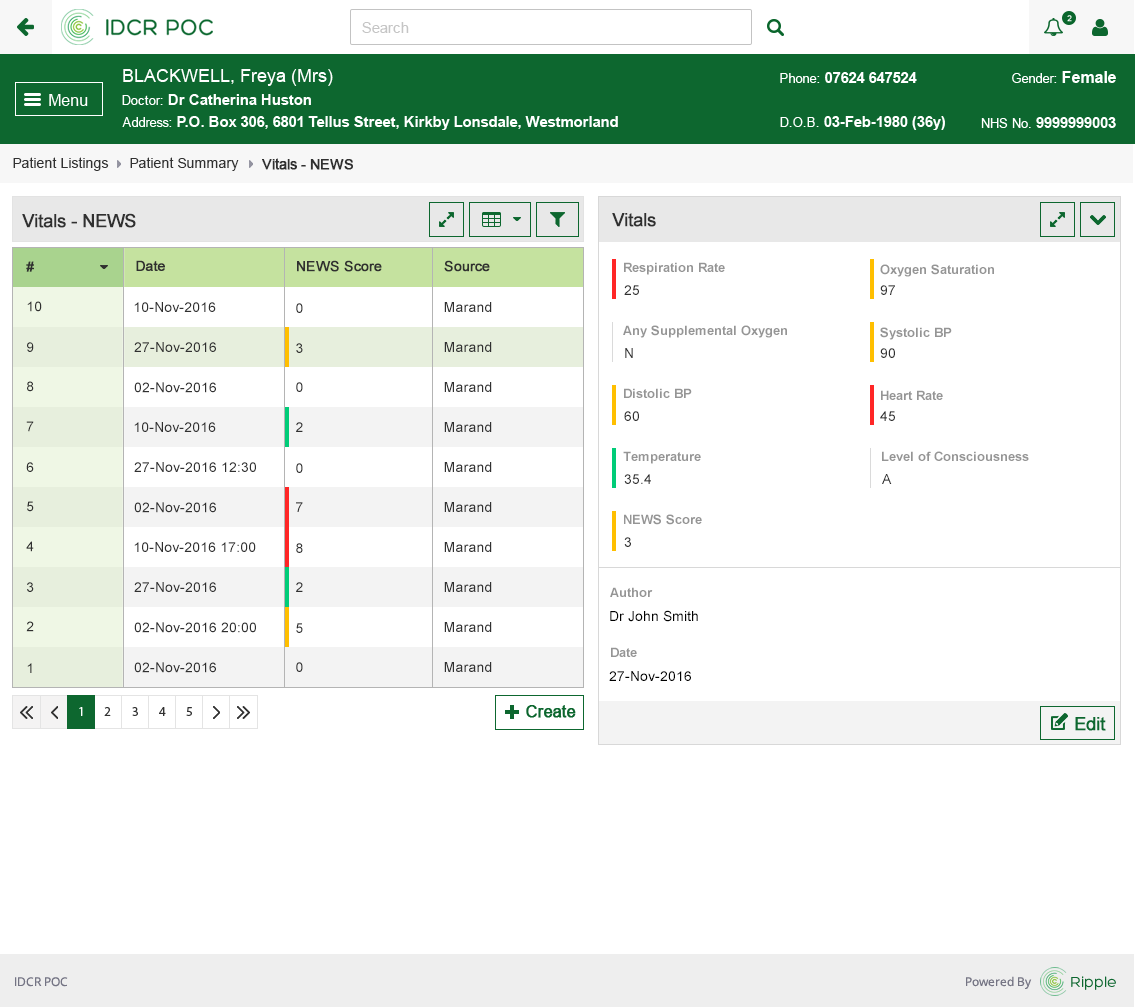
<style>
.page{position:relative;width:1135px;height:1007px;background:#ffffff}
.page>*{position:absolute;margin:0}
.t1{font:14px "ArialMT";color:#313131}
.t2{font:14px "ArialMT";color:#313131;font-weight:bold}
.t3{font:18px "ArialMT";color:#303030;font-weight:bold}
.t4{font:14px "ArialMT";color:#303030;font-weight:bold}
.t5{font:13px "Arial-BoldMT";color:#959595}
.t6{font:14px "ArialMT";color:#303030}
.t7{font:14px "ArialMT";color:#000000}
</style>
<div class="page">
<p class="t1" style="left:13px;top:157px;width:96px;height:14px">Patient Listings</p>
<p class="t1" style="left:130px;top:157px;width:109px;height:14px">Patient Summary</p>
<p class="t2" style="left:262px;top:158px;width:91px;height:12px">Vitals - NEWS</p>
<p class="t3" style="left:22px;top:213px;width:114px;height:15px">Vitals - NEWS</p>
<p class="t3" style="left:612px;top:213px;width:44px;height:14px">Vitals</p>
<p class="t4" style="left:26px;top:261px;width:8px;height:11px">#</p>
<p class="t4" style="left:136px;top:260px;width:29px;height:11px">Date</p>
<p class="t4" style="left:297px;top:260px;width:85px;height:12px">NEWS Score</p>
<p class="t4" style="left:444px;top:260px;width:46px;height:12px">Source</p>
<p class="t5" style="left:624px;top:262px;width:101px;height:13px">Respiration Rate</p>
<p class="t5" style="left:880px;top:264px;width:114px;height:13px">Oxygen Saturation</p>
<p class="t6" style="left:624px;top:285px;width:15px;height:10px">25</p>
<p class="t6" style="left:880px;top:285px;width:15px;height:10px">97</p>
<p class="t6" style="left:27px;top:301px;width:15px;height:11px">10</p>
<p class="t6" style="left:134px;top:302px;width:82px;height:10px">10-Nov-2016</p>
<p class="t6" style="left:296px;top:303px;width:7px;height:10px">0</p>
<p class="t6" style="left:444px;top:302px;width:48px;height:10px">Marand</p>
<p class="t5" style="left:623px;top:325px;width:164px;height:13px">Any Supplemental Oxygen</p>
<p class="t5" style="left:880px;top:327px;width:72px;height:13px">Systolic BP</p>
<p class="t6" style="left:27px;top:342px;width:7px;height:10px">9</p>
<p class="t6" style="left:134px;top:342px;width:82px;height:10px">27-Nov-2016</p>
<p class="t6" style="left:444px;top:342px;width:48px;height:10px">Marand</p>
<p class="t6" style="left:296px;top:343px;width:7px;height:10px">3</p>
<p class="t6" style="left:625px;top:348px;width:8px;height:10px">N</p>
<p class="t6" style="left:880px;top:348px;width:15px;height:10px">90</p>
<p class="t6" style="left:27px;top:381px;width:7px;height:11px">8</p>
<p class="t6" style="left:134px;top:382px;width:82px;height:11px">02-Nov-2016</p>
<p class="t6" style="left:296px;top:382px;width:7px;height:10px">0</p>
<p class="t6" style="left:444px;top:382px;width:48px;height:10px">Marand</p>
<p class="t5" style="left:624px;top:388px;width:68px;height:10px">Distolic BP</p>
<p class="t5" style="left:881px;top:390px;width:62px;height:10px">Heart Rate</p>
<p class="t6" style="left:624px;top:411px;width:15px;height:10px">60</p>
<p class="t6" style="left:880px;top:411px;width:15px;height:10px">45</p>
<p class="t6" style="left:26px;top:421px;width:8px;height:11px">7</p>
<p class="t6" style="left:134px;top:422px;width:82px;height:10px">10-Nov-2016</p>
<p class="t6" style="left:296px;top:422px;width:7px;height:10px">2</p>
<p class="t6" style="left:444px;top:422px;width:48px;height:10px">Marand</p>
<p class="t6" style="left:26px;top:462px;width:8px;height:10px">6</p>
<p class="t6" style="left:134px;top:462px;width:122px;height:10px">27-Nov-2016 12:30</p>
<p class="t6" style="left:444px;top:462px;width:48px;height:10px">Marand</p>
<p class="t5" style="left:623px;top:451px;width:78px;height:13px">Temperature</p>
<p class="t5" style="left:882px;top:451px;width:147px;height:10px">Level of Consciousness</p>
<p class="t6" style="left:296px;top:463px;width:7px;height:10px">0</p>
<p class="t6" style="left:624px;top:474px;width:27px;height:10px">35.4</p>
<p class="t6" style="left:882px;top:474px;width:10px;height:10px">A</p>
<p class="t6" style="left:27px;top:501px;width:7px;height:11px">5</p>
<p class="t6" style="left:134px;top:502px;width:82px;height:11px">02-Nov-2016</p>
<p class="t6" style="left:296px;top:502px;width:7px;height:10px">7</p>
<p class="t6" style="left:444px;top:502px;width:48px;height:10px">Marand</p>
<p class="t5" style="left:624px;top:514px;width:78px;height:11px">NEWS Score</p>
<p class="t6" style="left:26px;top:541px;width:8px;height:11px">4</p>
<p class="t6" style="left:134px;top:542px;width:122px;height:10px">10-Nov-2016 17:00</p>
<p class="t6" style="left:296px;top:543px;width:7px;height:10px">8</p>
<p class="t6" style="left:444px;top:542px;width:48px;height:10px">Marand</p>
<p class="t6" style="left:624px;top:537px;width:7px;height:10px">3</p>
<p class="t6" style="left:27px;top:582px;width:7px;height:10px">3</p>
<p class="t6" style="left:134px;top:582px;width:82px;height:10px">27-Nov-2016</p>
<p class="t6" style="left:296px;top:582px;width:7px;height:10px">2</p>
<p class="t6" style="left:444px;top:582px;width:48px;height:10px">Marand</p>
<p class="t5" style="left:610px;top:587px;width:43px;height:10px">Author</p>
<p class="t7" style="left:610px;top:610px;width:88px;height:12px">Dr John Smith</p>
<p class="t6" style="left:26px;top:621px;width:8px;height:11px">2</p>
<p class="t6" style="left:134px;top:622px;width:122px;height:11px">02-Nov-2016 20:00</p>
<p class="t6" style="left:296px;top:623px;width:7px;height:10px">5</p>
<p class="t6" style="left:444px;top:622px;width:48px;height:10px">Marand</p>
<p class="t5" style="left:611px;top:647px;width:26px;height:10px">Date</p>
<p class="t6" style="left:27px;top:663px;width:5px;height:10px">1</p>
<p class="t6" style="left:134px;top:662px;width:82px;height:11px">02-Nov-2016</p>
<p class="t6" style="left:296px;top:662px;width:7px;height:10px">0</p>
<p class="t6" style="left:444px;top:662px;width:48px;height:10px">Marand</p>
<p class="t7" style="left:609px;top:671px;width:82px;height:10px">27-Nov-2016</p>
</div>
